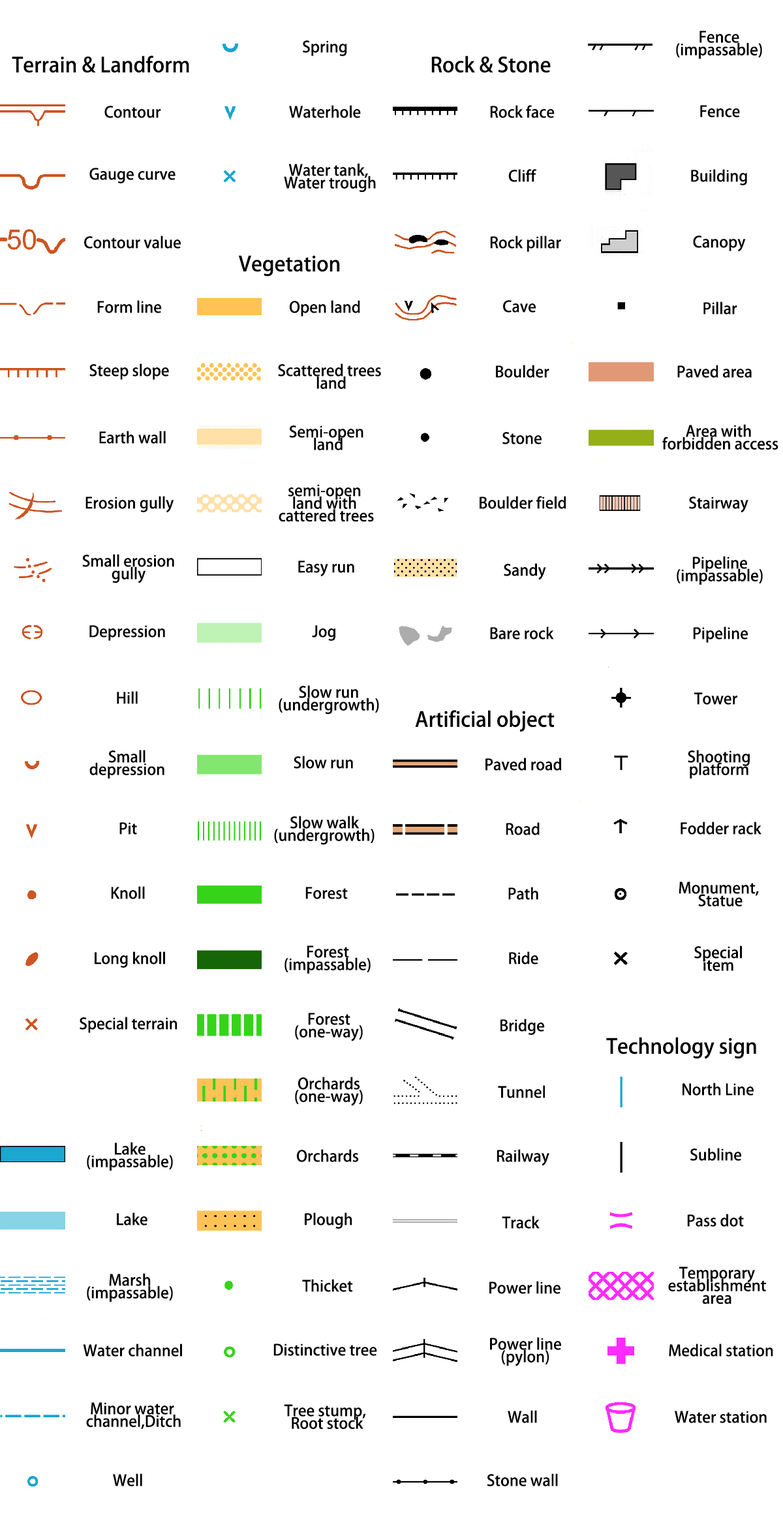
<style>
.page{position:relative;width:783px;height:1523px;background:#ffffff}
.page>*{position:absolute;margin:0}
.t1{font:26.1px "AdobeHeitiStd-Regular";color:#000000}
.t2{font:26.1px/12.6px "AdobeHeitiStd-Regular";color:#000000}
.t3{font:34.8px "AdobeHeitiStd-Regular";color:#000000}
</style>
<div class="page">
<p class="t1" style="left:303px;top:40px;width:44px;height:16px">Spring</p>
<p class="t2" style="left:676px;top:31px;width:86px;height:28px;text-align:center">Fence<br>(impassable)</p>
<p class="t3" style="left:12px;top:55px;width:177px;height:18px">Terrain &amp; Landform</p>
<p class="t3" style="left:431px;top:55px;width:120px;height:18px">Rock &amp; Stone</p>
<p class="t1" style="left:104px;top:106px;width:57px;height:12px">Contour</p>
<p class="t1" style="left:289px;top:105px;width:72px;height:13px">Waterhole</p>
<p class="t1" style="left:490px;top:105px;width:65px;height:13px">Rock face</p>
<p class="t1" style="left:700px;top:105px;width:40px;height:12px">Fence</p>
<p class="t1" style="left:89px;top:168px;width:87px;height:15px">Gauge curve</p>
<p class="t2" style="left:284px;top:163px;width:92px;height:29px;text-align:center">Water tank, <br>Water trough</p>
<p class="t1" style="left:508px;top:169px;width:28px;height:13px">Cliff</p>
<p class="t1" style="left:691px;top:169px;width:56px;height:16px">Building</p>
<p class="t1" style="left:84px;top:236px;width:97px;height:13px">Contour value</p>
<p class="t1" style="left:490px;top:236px;width:71px;height:16px">Rock pillar</p>
<p class="t1" style="left:693px;top:236px;width:53px;height:16px">Canopy</p>
<p class="t3" style="left:238px;top:255px;width:102px;height:22px">Vegetation</p>
<p class="t1" style="left:97px;top:300px;width:65px;height:13px">Form line</p>
<p class="t1" style="left:289px;top:300px;width:71px;height:16px">Open land</p>
<p class="t1" style="left:503px;top:300px;width:33px;height:13px">Cave</p>
<p class="t1" style="left:703px;top:301px;width:34px;height:14px">Pillar</p>
<p class="t1" style="left:89px;top:363px;width:80px;height:17px">Steep slope</p>
<p class="t2" style="left:278px;top:363px;width:103px;height:26px;text-align:center">Scattered trees<br> land</p>
<p class="t1" style="left:496px;top:365px;width:53px;height:13px">Boulder</p>
<p class="t1" style="left:677px;top:365px;width:75px;height:13px">Paved area</p>
<p class="t2" style="left:289px;top:425px;width:74px;height:25px;text-align:center">Semi-open <br>land</p>
<p class="t2" style="left:662px;top:424px;width:116px;height:26px;text-align:center">Area with <br>forbidden access</p>
<p class="t1" style="left:99px;top:431px;width:67px;height:13px">Earth wall</p>
<p class="t1" style="left:502px;top:432px;width:40px;height:12px">Stone</p>
<p class="t2" style="left:279px;top:484px;width:95px;height:38px;text-align:center">semi-open <br>land with <br>cattered trees</p>
<p class="t1" style="left:85px;top:496px;width:89px;height:17px">Erosion gully</p>
<p class="t1" style="left:480px;top:496px;width:86px;height:13px">Boulder field</p>
<p class="t1" style="left:689px;top:497px;width:59px;height:16px">Stairway</p>
<p class="t2" style="left:82px;top:554px;width:92px;height:29px;text-align:center">Small erosion<br>gully</p>
<p class="t2" style="left:677px;top:556px;width:86px;height:29px;text-align:center">Pipeline<br>(impassable)</p>
<p class="t1" style="left:298px;top:560px;width:56px;height:17px">Easy run</p>
<p class="t1" style="left:504px;top:563px;width:42px;height:17px">Sandy</p>
<p class="t1" style="left:89px;top:625px;width:76px;height:16px">Depression</p>
<p class="t1" style="left:312px;top:625px;width:24px;height:16px">Jog</p>
<p class="t1" style="left:490px;top:626px;width:64px;height:13px">Bare rock</p>
<p class="t1" style="left:693px;top:626px;width:55px;height:17px">Pipeline</p>
<p class="t2" style="left:279px;top:685px;width:100px;height:29px;text-align:center">Slow run<br>(undergrowth)</p>
<p class="t1" style="left:117px;top:691px;width:21px;height:13px">Hill</p>
<p class="t1" style="left:694px;top:692px;width:43px;height:13px">Tower</p>
<p class="t3" style="left:415px;top:710px;width:140px;height:22px">Artificial object</p>
<p class="t2" style="left:89px;top:750px;width:75px;height:28px;text-align:center">Small<br>depression</p>
<p class="t2" style="left:688px;top:750px;width:62px;height:28px;text-align:center">Shooting<br>platform</p>
<p class="t1" style="left:294px;top:756px;width:59px;height:13px">Slow run</p>
<p class="t1" style="left:485px;top:758px;width:77px;height:13px">Paved road</p>
<p class="t2" style="left:274px;top:816px;width:101px;height:29px;text-align:center">Slow walk<br>(undergrowth)</p>
<p class="t1" style="left:681px;top:821px;width:80px;height:14px">Fodder rack</p>
<p class="t1" style="left:119px;top:822px;width:18px;height:13px">Pit</p>
<p class="t1" style="left:506px;top:822px;width:34px;height:13px">Road</p>
<p class="t2" style="left:679px;top:882px;width:80px;height:24px;text-align:center">Monument, <br>Statue</p>
<p class="t1" style="left:111px;top:886px;width:34px;height:13px">Knoll</p>
<p class="t1" style="left:305px;top:887px;width:43px;height:12px">Forest</p>
<p class="t1" style="left:508px;top:887px;width:30px;height:13px">Path</p>
<p class="t1" style="left:95px;top:951px;width:70px;height:17px">Long knoll</p>
<p class="t2" style="left:284px;top:945px;width:87px;height:29px;text-align:center">Forest<br>(impassable)</p>
<p class="t1" style="left:509px;top:951px;width:29px;height:13px">Ride</p>
<p class="t2" style="left:694px;top:945px;width:48px;height:26px;text-align:center">Special<br>item</p>
<p class="t2" style="left:295px;top:1013px;width:68px;height:28px;text-align:center">Forest<br>(one-way)</p>
<p class="t1" style="left:80px;top:1017px;width:97px;height:16px">Special terrain</p>
<p class="t1" style="left:500px;top:1019px;width:44px;height:16px">Bridge</p>
<p class="t3" style="left:606px;top:1037px;width:150px;height:22px">Technology sign</p>
<p class="t2" style="left:295px;top:1077px;width:68px;height:29px;text-align:center">Orchards<br>(one-way)</p>
<p class="t1" style="left:498px;top:1085px;width:47px;height:13px">Tunnel</p>
<p class="t1" style="left:683px;top:1082px;width:71px;height:14px">North Line</p>
<p class="t2" style="left:87px;top:1142px;width:86px;height:29px;text-align:center">Lake<br>(impassable)</p>
<p class="t1" style="left:296px;top:1149px;width:63px;height:13px">Orchards</p>
<p class="t1" style="left:497px;top:1149px;width:52px;height:17px">Railway</p>
<p class="t1" style="left:690px;top:1148px;width:51px;height:13px">Subline</p>
<p class="t1" style="left:117px;top:1212px;width:30px;height:13px">Lake</p>
<p class="t1" style="left:305px;top:1212px;width:47px;height:17px">Plough</p>
<p class="t1" style="left:502px;top:1216px;width:38px;height:13px">Track</p>
<p class="t1" style="left:687px;top:1214px;width:57px;height:13px">Pass dot</p>
<p class="t2" style="left:87px;top:1273px;width:86px;height:29px;text-align:center">Marsh<br>(impassable)</p>
<p class="t2" style="left:668px;top:1266px;width:98px;height:38px;text-align:center">Temporary<br>establishment<br>area</p>
<p class="t1" style="left:302px;top:1279px;width:51px;height:13px">Thicket</p>
<p class="t1" style="left:489px;top:1281px;width:71px;height:13px">Power line</p>
<p class="t2" style="left:490px;top:1337px;width:71px;height:29px;text-align:center">Power line<br>(pylon)</p>
<p class="t1" style="left:83px;top:1343px;width:99px;height:14px">Water channel</p>
<p class="t1" style="left:273px;top:1343px;width:104px;height:13px">Distinctive tree</p>
<p class="t1" style="left:669px;top:1343px;width:104px;height:14px">Medical station</p>
<p class="t2" style="left:86px;top:1402px;width:95px;height:27px;text-align:center">Minor water <br>channel,Ditch</p>
<p class="t2" style="left:284px;top:1404px;width:82px;height:25px;text-align:center">Tree stump, <br>Root stock</p>
<p class="t1" style="left:508px;top:1410px;width:29px;height:13px">Wall</p>
<p class="t1" style="left:675px;top:1411px;width:92px;height:12px">Water station</p>
<p class="t1" style="left:113px;top:1473px;width:29px;height:13px">Well</p>
<p class="t1" style="left:487px;top:1473px;width:71px;height:13px">Stone wall</p>
</div>
